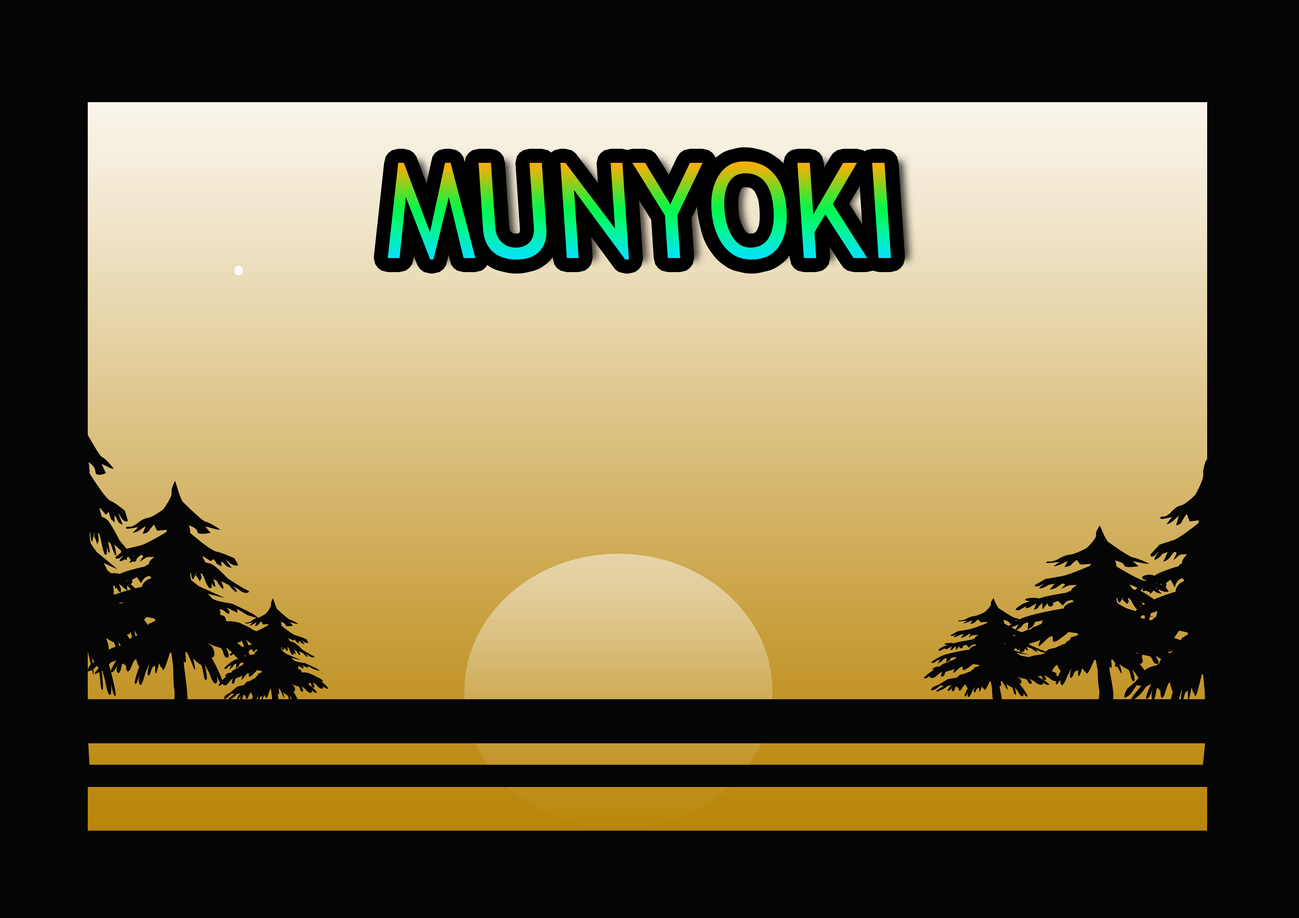
<style>
.page{position:relative;width:1299px;height:918px;background:#050505}
.page>*{position:absolute;margin:0}
.t1{font:133.2px "TrebuchetMS";scale:0.95 1}
</style>
<div class="page">
<p class="t1" style="left:388px;top:161px;width:503px;height:99px">MUNYOKI</p>
</div>
